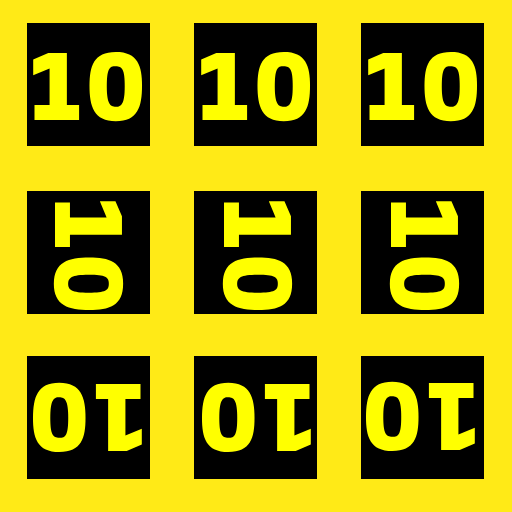
<style>
.page{position:relative;width:512px;height:512px;background:#ffea17}
.page>*{position:absolute;margin:0}
.t1{font:130px "Share-BoldOSF";color:#ffff00}
</style>
<div class="page">
<p class="t1" style="left:33px;top:51px;width:110px;height:71px">10</p>
<p class="t1" style="left:201px;top:51px;width:110px;height:71px">10</p>
<p class="t1" style="left:368px;top:51px;width:110px;height:71px">10</p>
<p class="t1" style="left:53px;top:201px;width:71px;height:110px;rotate:90deg">10</p>
<p class="t1" style="left:222px;top:201px;width:71px;height:110px;rotate:90deg">10</p>
<p class="t1" style="left:389px;top:201px;width:71px;height:110px;rotate:90deg">10</p>
<p class="t1" style="left:32px;top:382px;width:110px;height:71px;rotate:-180deg">10</p>
<p class="t1" style="left:201px;top:382px;width:110px;height:71px;rotate:-180deg">10</p>
<p class="t1" style="left:365px;top:381px;width:110px;height:71px;rotate:-180deg">10</p>
</div>
